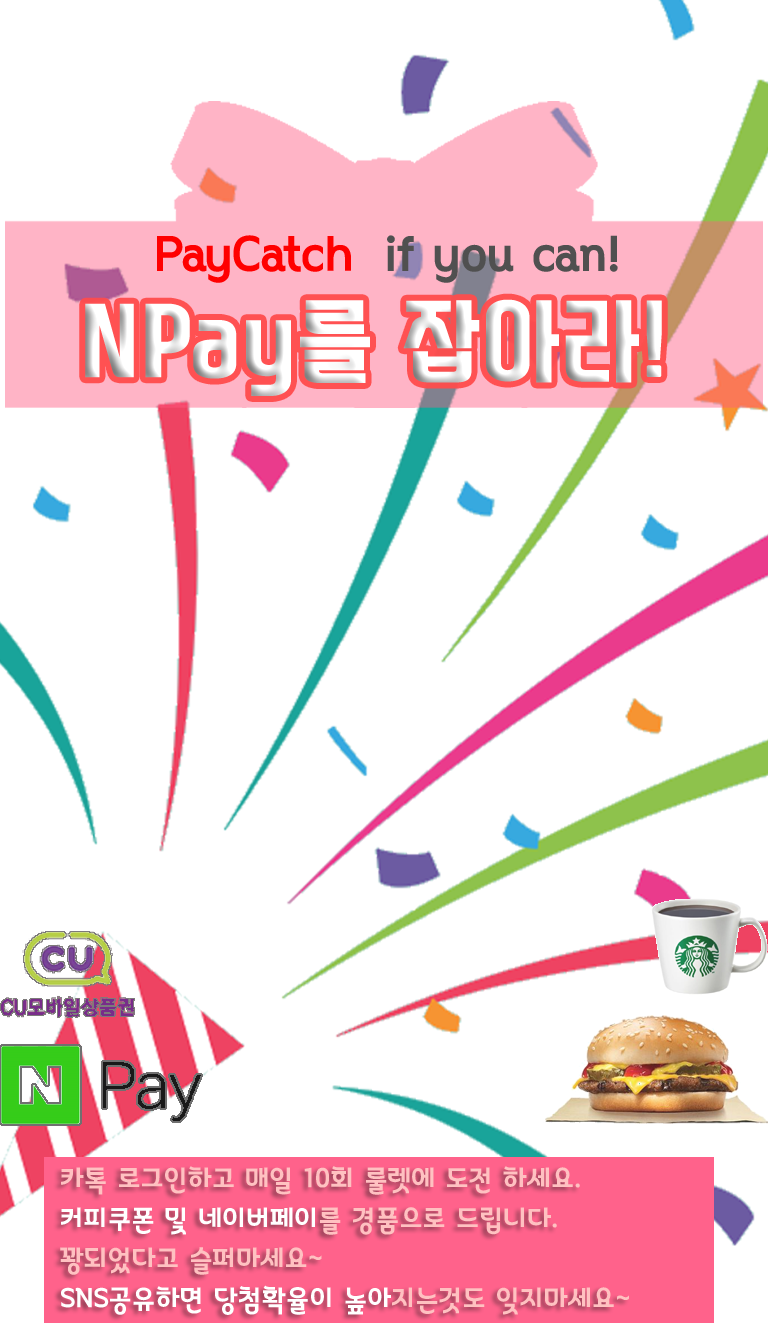
<style>
.page{position:relative;width:768px;height:1330px;background:#ffffff}
.page>*{position:absolute;margin:0}
.t1{font:55.2px "ThecircleB";color:#ff0000}
.t2{font:55.2px "ThecircleB";color:#505050}
.t3{font:104px "SwaggerTTF";color:#ffffff;scale:1.25 1}
.t4{font:30px/40.1px "ThecircleB";color:#ffbaba}
.t5{font:30px/40.1px "ThecircleB";color:#ffffff}
</style>
<div class="page">
<p class="t1" style="left:157px;top:235px;width:194px;height:48px">PayCatch</p>
<p class="t2" style="left:387px;top:235px;width:231px;height:48px">if you can!</p>
<p class="t3" style="left:85px;top:299px;width:577px;height:97px">NPay를 잡아라!</p>
<p class="t4" style="left:60px;top:1166px;width:569px;height:149px">카톡 로그인하고 매일 10회 룰렛에 도전 하세요.<br><span class="t5">커피쿠폰 및 네이버페이</span>를 경품으로 드립니다.<br>꽝되었다고 슬퍼마세요~<br><span class="t5">SNS공유하면 당첨확율이 높아</span>지는것도 잊지마세요~</p>
</div>
